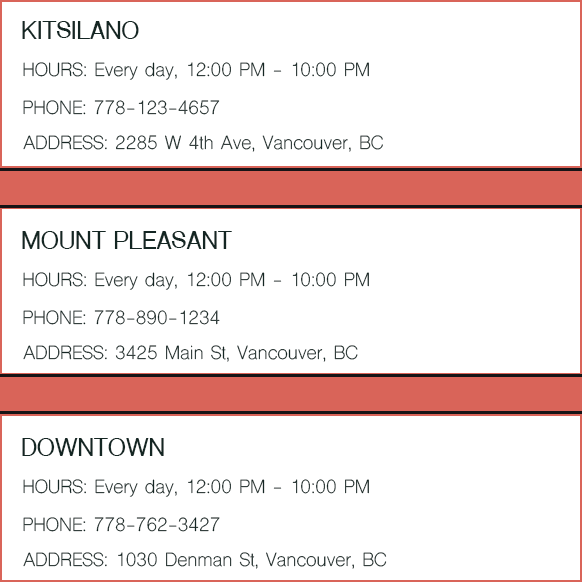
<style>
.page{position:relative;width:582px;height:582px;background:#ffffff}
.page>*{position:absolute;margin:0}
.t1{font:24px "ShreeDev0714-Bold";color:#142623}
.t2{font:18px "ShreeDev0714";color:#142623}
</style>
<div class="page">
<p class="t1" style="left:22px;top:21px;width:117px;height:18px">KITSILANO</p>
<p class="t2" style="left:23px;top:62px;width:346px;height:18px">HOURS: Every day, 12:00 PM - 10:00 PM</p>
<p class="t2" style="left:23px;top:100px;width:197px;height:15px">PHONE: 778-123-4657</p>
<p class="t2" style="left:23px;top:135px;width:360px;height:17px">ADDRESS: 2285 W 4th Ave, Vancouver, BC</p>
<p class="t1" style="left:22px;top:231px;width:210px;height:18px">MOUNT PLEASANT</p>
<p class="t2" style="left:23px;top:272px;width:346px;height:18px">HOURS: Every day, 12:00 PM - 10:00 PM</p>
<p class="t2" style="left:23px;top:310px;width:197px;height:15px">PHONE: 778-890-1234</p>
<p class="t2" style="left:23px;top:345px;width:335px;height:17px">ADDRESS: 3425 Main St, Vancouver, BC</p>
<p class="t1" style="left:22px;top:438px;width:142px;height:18px">DOWNTOWN</p>
<p class="t2" style="left:23px;top:479px;width:346px;height:18px">HOURS: Every day, 12:00 PM - 10:00 PM</p>
<p class="t2" style="left:23px;top:517px;width:197px;height:15px">PHONE: 778-762-3427</p>
<p class="t2" style="left:23px;top:552px;width:364px;height:17px">ADDRESS: 1030 Denman St, Vancouver, BC</p>
</div>
